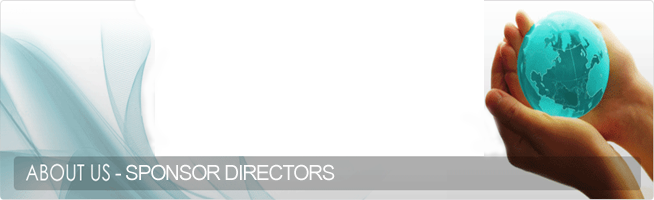
<style>
.page{position:relative;width:654px;height:200px;background:#ffffff}
.page>*{position:absolute;margin:0}
.t1{font:20.8px "ArialNarrow";letter-spacing:-0.05em;color:#fdfdfd;scale:1.21 1}
</style>
<div class="page">
<p class="t1" style="left:115px;top:164px;width:220px;height:17px">- SPONSOR DIRECTORS</p>
</div>
